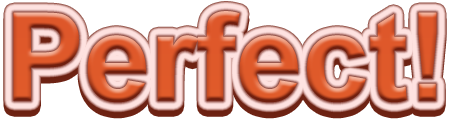
<style>
.page{position:relative;width:450px;height:122px;background:#ffffff}
.page>*{position:absolute;margin:0}
.t1{font:122.8px "Arial-BoldMT";scale:0.97 1}
</style>
<div class="page">
<p class="t1" style="left:13px;top:17px;width:424px;height:92px">Perfect!</p>
<p class="t1" style="left:13px;top:11px;width:424px;height:92px">Perfect!</p>
</div>
